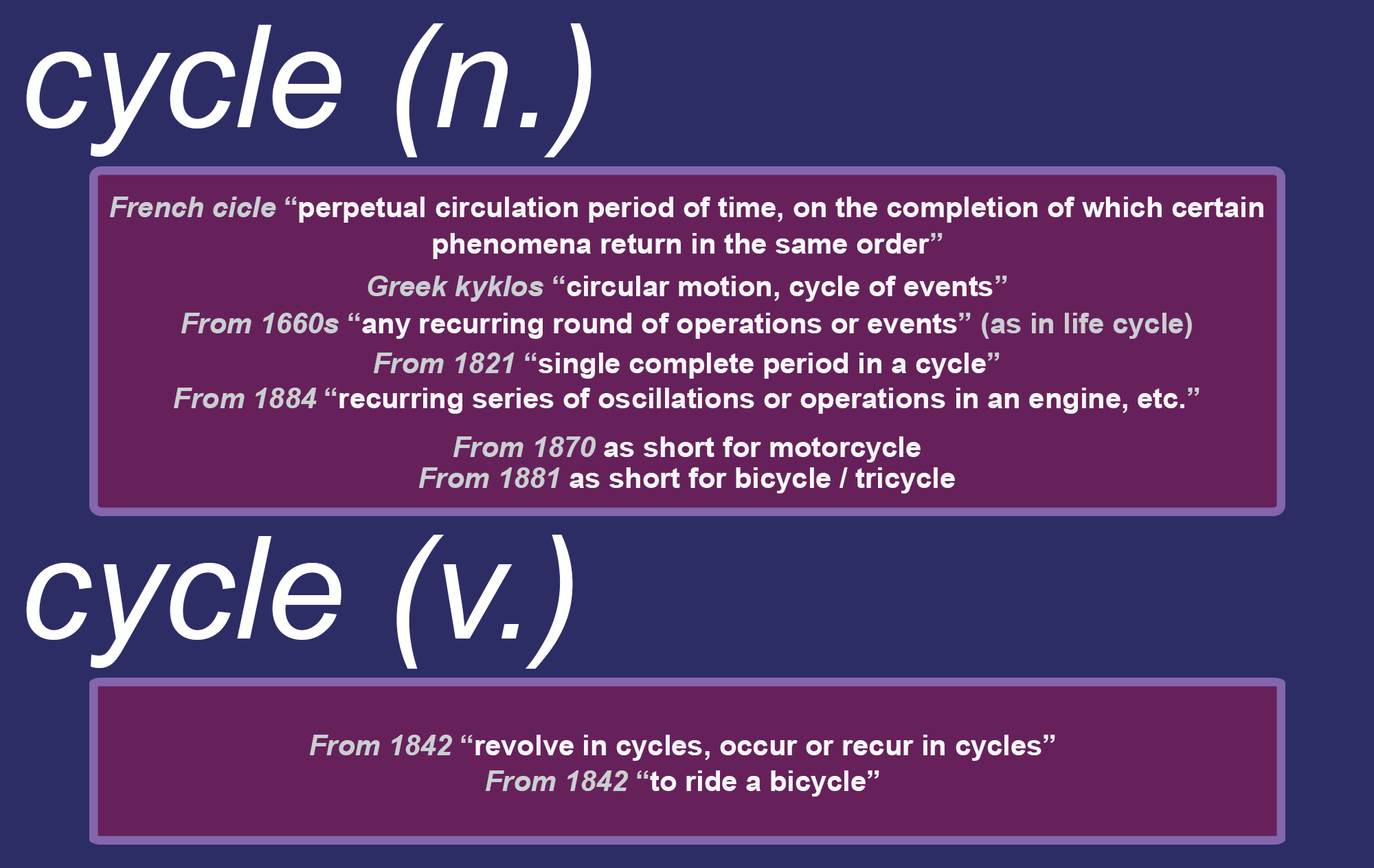
<style>
.page{position:relative;width:1374px;height:868px;background:#2d2d66}
.page>*{position:absolute;margin:0}
.t1{font:143.1px "Arial-ItalicMT";color:#ffffff}
.t2{font:28.4px "Arial-BoldMT";color:#f6f6f9}
.t3{font:28.4px "Arial-BoldItalicMT";color:#caced1}
.t4{font:28.4px "Arial-BoldMT";color:#caced1}
.t5{font:28.3px "Arial-BoldMT";color:#f6f6f9}
.t6{font:28.3px "Arial-BoldItalicMT";color:#caced1}
.t7{font:28.3px "Arial-BoldMT";color:#caced1}
</style>
<div class="page">
<p class="t1" style="left:26px;top:23px;width:566px;height:134px">cycle (n.)</p>
<p class="t2" style="left:110px;top:197px;width:1154px;height:26px"><span class="t3">French cicle </span><span class="t4">“</span>perpetual circulation period of time, on the completion of which certain</p>
<p class="t2" style="left:433px;top:233px;width:510px;height:26px">phenomena return in the same order<span class="t4">”</span></p>
<p class="t2" style="left:368px;top:276px;width:639px;height:26px"><span class="t3">Greek kyklos </span><span class="t4">“</span>circular motion, cycle of events<span class="t4">”</span></p>
<p class="t2" style="left:181px;top:313px;width:1011px;height:26px"><span class="t3">From 1660s </span><span class="t4">“</span>any recurring round of operations or events<span class="t4">” (as in life cycle)</span></p>
<p class="t2" style="left:374px;top:352px;width:626px;height:27px"><span class="t3">From 1821 </span><span class="t4">“</span>single complete period in a cycle<span class="t4">”</span></p>
<p class="t2" style="left:174px;top:388px;width:1026px;height:26px"><span class="t3">From 1884 </span><span class="t4">“</span>recurring series of oscillations or operations in an engine, etc.<span class="t4">”</span></p>
<p class="t2" style="left:453px;top:436px;width:468px;height:26px"><span class="t3">From 1870 </span>as short for motorcycle</p>
<p class="t2" style="left:419px;top:467px;width:536px;height:26px"><span class="t3">From 1881 </span>as short for bicycle / tricycle</p>
<p class="t1" style="left:26px;top:535px;width:547px;height:134px">cycle (v.)</p>
<p class="t5" style="left:310px;top:734px;width:745px;height:27px"><span class="t6">From 1842 </span><span class="t7">“</span>revolve in cycles, occur or recur in cycles”</p>
<p class="t5" style="left:486px;top:770px;width:393px;height:26px"><span class="t6">From 1842 </span><span class="t7">“</span>to ride a bicycle”</p>
</div>
